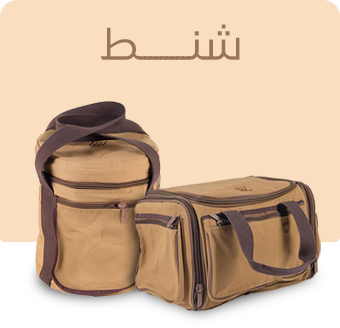
<style>
.page{position:relative;width:340px;height:328px;background:#f9dec0}
.page>*{position:absolute;margin:0}
.t1{font:41.7px "Noor-Regular";color:#987553}
</style>
<div class="page">
<p class="t1" style="left:100px;top:24px;width:140px;height:36px">شنـــــــــط</p>
</div>
